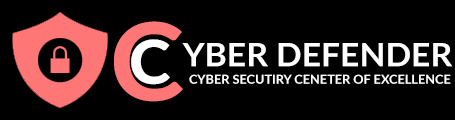
<style>
.page{position:relative;width:455px;height:120px;background:#000000}
.page>*{position:absolute;margin:0}
.t1{font:107.5px "Lato-Bold";color:#ff7676;scale:1.04 1}
.t2{font:60.4px "Lato-Heavy";color:#ffffff;scale:1.04 1}
.t3{font:32.3px "Lato-Bold";color:#fefefe;scale:1.04 1}
.t4{font:12.2px "Lato-Bold";color:#ffffff;scale:1.04 1}
</style>
<div class="page">
<p class="t1" style="left:114px;top:21px;width:69px;height:81px">C</p>
<p class="t2" style="left:131px;top:39px;width:39px;height:46px">C</p>
<p class="t3" style="left:182px;top:43px;width:271px;height:24px">YBER DEFENDER</p>
<p class="t4" style="left:189px;top:74px;width:262px;height:10px">CYBER SECUTIRY CENETER OF EXCELLENCE</p>
</div>
